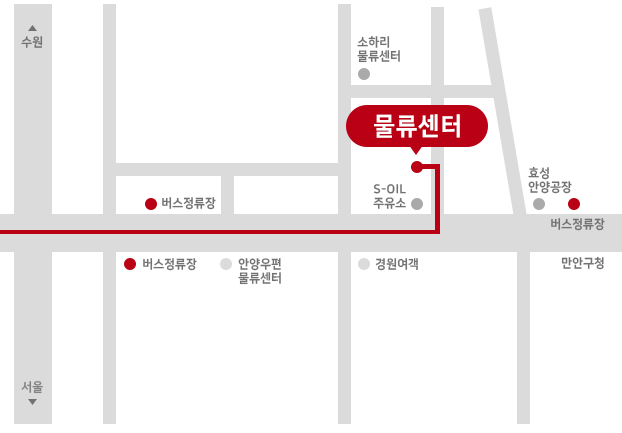
<style>
.page{position:relative;width:622px;height:433px;background:#ffffff}
.page>*{position:absolute;margin:0}
.t1{font:12.5px "NanumSquareEB";letter-spacing:0.025em;color:#727272;scale:0.95 1}
.t2{font:12.5px/14.8px "NanumSquareEB";letter-spacing:0.025em;color:#727272;scale:0.95 1}
.t3{font:25px "NanumSquareEB";letter-spacing:0.025em;color:#ffffff;scale:0.95 1}
.t4{font:12.5px "NanumSquareEB";letter-spacing:0.025em;color:#838383;scale:0.95 1}
</style>
<div class="page">
<p class="t1" style="left:21px;top:36px;width:22px;height:12px">수원</p>
<p class="t2" style="left:357px;top:36px;width:43px;height:27px">소하리<br>물류센터</p>
<p class="t3" style="left:374px;top:114px;width:86px;height:24px">물류센터</p>
<p class="t2" style="left:528px;top:166px;width:44px;height:28px">효성<br>안양공장</p>
<p class="t2" style="left:373px;top:184px;width:33px;height:25px">S-OIL<br>주유소</p>
<p class="t1" style="left:162px;top:197px;width:54px;height:13px">버스정류장</p>
<p class="t1" style="left:551px;top:218px;width:54px;height:13px">버스정류장</p>
<p class="t1" style="left:561px;top:256px;width:43px;height:14px">만안구청</p>
<p class="t1" style="left:143px;top:258px;width:54px;height:13px">버스정류장</p>
<p class="t2" style="left:238px;top:258px;width:43px;height:27px">안양우편<br>물류센터</p>
<p class="t1" style="left:375px;top:258px;width:43px;height:13px">경원여객</p>
<p class="t4" style="left:21px;top:381px;width:22px;height:13px">서울</p>
</div>
